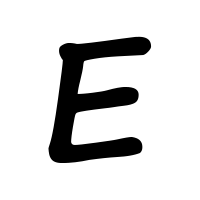
<style>
.page{position:relative;width:200px;height:200px;background:#ffffff}
.page>*{position:absolute;margin:0}
.t1{font:170px "SegoePrint-Bold";color:#000000}
</style>
<div class="page">
<p class="t1" style="left:48px;top:36px;width:104px;height:127px">E</p>
</div>
